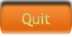
<style>
.page{position:relative;width:72px;height:37px}
.page>*{position:absolute;margin:0}
.t1{font:15px "TrebuchetMS";color:#cfcc79}
</style>
<div class="page">
<p class="t1" style="left:22px;top:13px;width:28px;height:14px">Quit</p>
</div>
